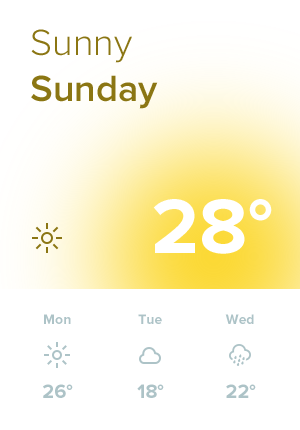
<style>
.page{position:relative;width:300px;height:430px;background:#ffffff}
.page>*{position:absolute;margin:0}
.t1{font:38px "ProximaNova-Semibold";color:#8b7613}
.t2{font:38px "ProximaNova-Light";color:#8b7613}
.t3{font:80px "ProximaNova-Bold";color:#ffffff;text-transform:uppercase}
.t4{font:14px "ProximaNova-Bold";color:#adc3c7}
.t5{font:20px "ProximaNova-Bold";color:#adc3c7}
</style>
<div class="page">
<p class="t1" style="left:31px;top:29px;width:127px;height:80px"><span class="t2">Sunny<br></span>Sunday</p>
<p class="t3" style="left:153px;top:199px;width:119px;height:55px">28°</p>
<p class="t4" style="left:44px;top:314px;width:27px;height:10px">Mon</p>
<p class="t4" style="left:138px;top:314px;width:24px;height:10px">Tue</p>
<p class="t4" style="left:225px;top:314px;width:29px;height:10px">Wed</p>
<p class="t5" style="left:43px;top:384px;width:30px;height:14px">26°</p>
<p class="t5" style="left:137px;top:384px;width:27px;height:14px">18°</p>
<p class="t5" style="left:226px;top:384px;width:30px;height:14px">22°</p>
</div>
